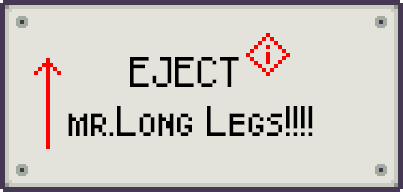
<style>
.page{position:relative;width:403px;height:192px;background:#e3e3db}
.page>*{position:absolute;margin:0}
.t1{font:30px/48.7px "Pixel-Caps";color:#000000}
</style>
<div class="page">
<p class="t1" style="left:68px;top:57px;width:245px;height:79px;text-align:center">EJECT <br>mr.Long Legs!!!!</p>
</div>
